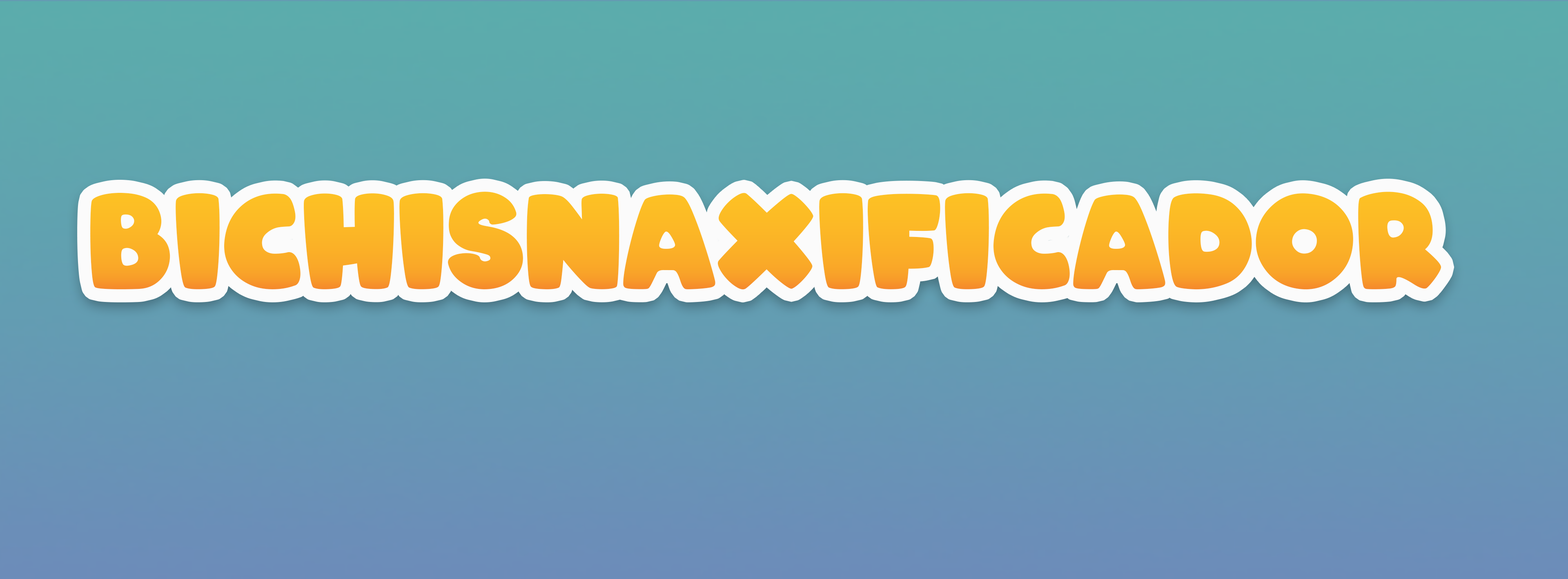
<style>
.page{position:relative;width:1568px;height:579px}
.page>*{position:absolute;margin:0}
.t1{font:127.6px "ARCO";letter-spacing:-0.01em;color:#fdc224}
</style>
<div class="page">
<p class="t1" style="left:90px;top:192px;width:1351px;height:98px">Bichisnaxificador</p>
</div>
